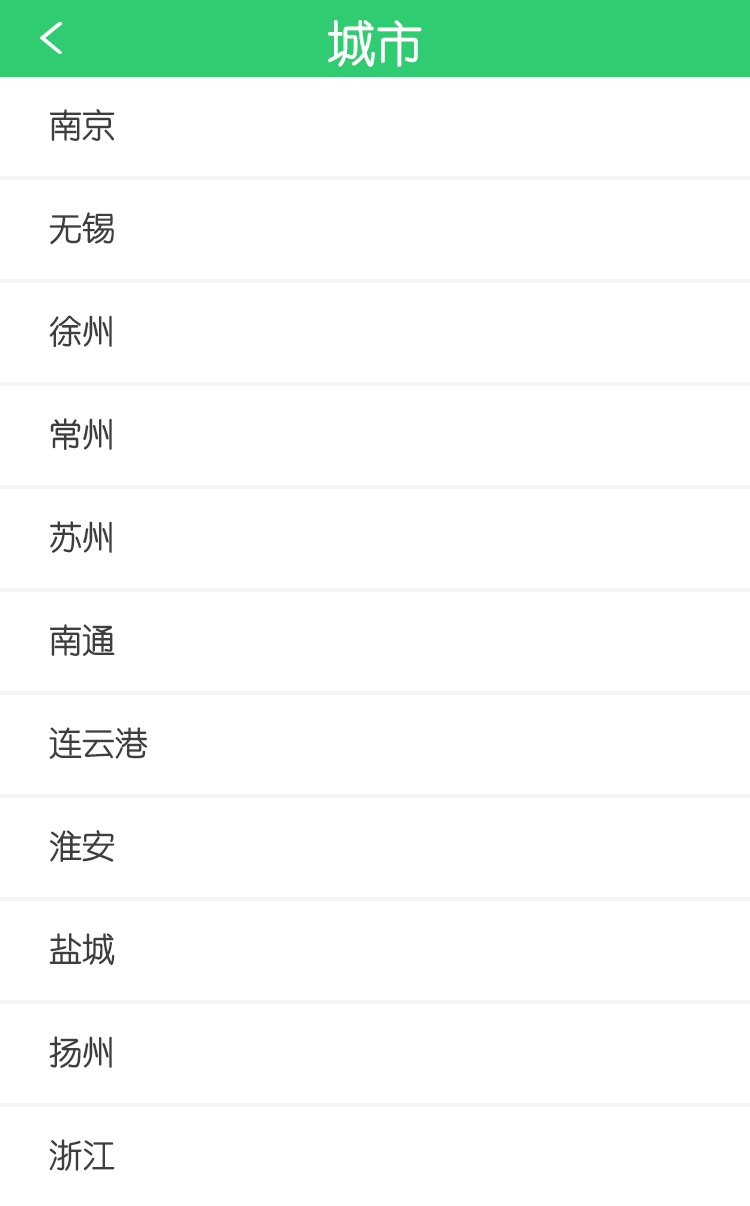
<style>
.page{position:relative;width:750px;height:1206px;background:#ffffff}
.page>*{position:absolute;margin:0}
.t1{font:48.7px "STYuanti-SC-Regular";color:#ffffff}
.t2{font:33px/103px "STYuanti-SC-Regular";color:#3e3e3e}
</style>
<div class="page">
<p class="t1" style="left:328px;top:20px;width:94px;height:47px">城市</p>
<p class="t2" style="left:49px;top:109px;width:99px;height:1062px">南京<br>无锡<br>徐州<br>常州<br>苏州<br>南通<br>连云港<br>淮安<br>盐城<br>扬州<br>浙江</p>
</div>
